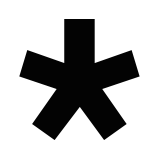
<style>
.page{position:relative;width:160px;height:160px;background:#ffffff}
.page>*{position:absolute;margin:0}
.t1{font:360px "Helvetica-Bold";color:#030303}
</style>
<div class="page">
<p class="t1" style="left:19px;top:19px;width:121px;height:121px">*</p>
</div>
